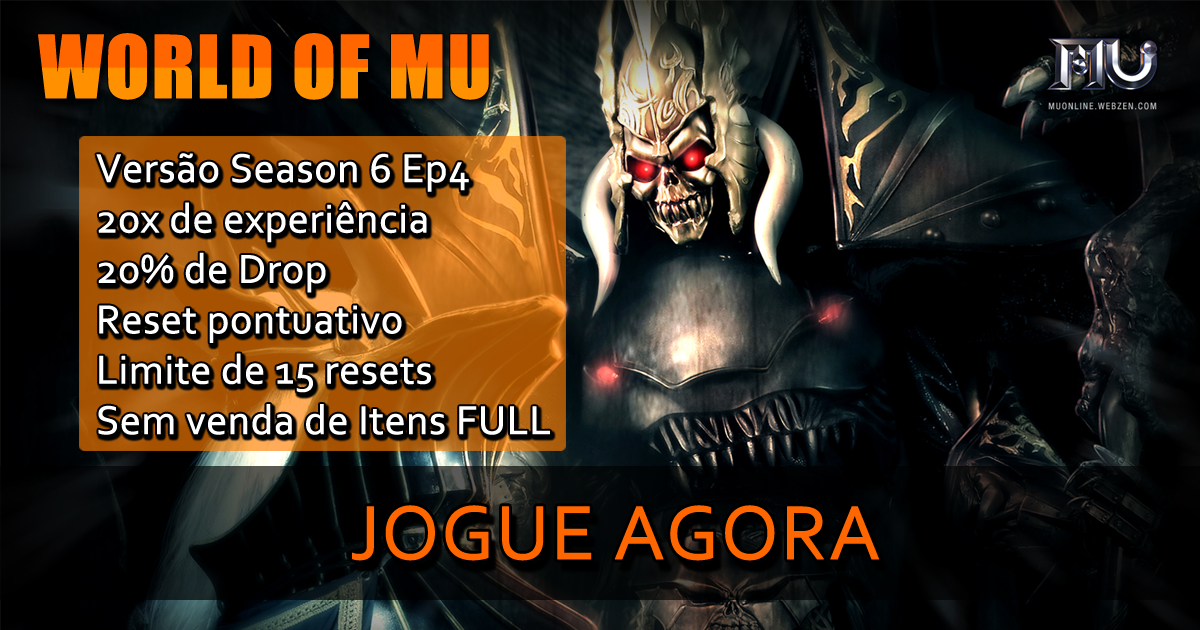
<style>
.page{position:relative;width:1200px;height:630px}
.page>*{position:absolute;margin:0}
.t1{font:80px "Impact";font-weight:bold}
.t2{font:42px "Corbel";letter-spacing:-0.01em;color:#ffffff;font-weight:bold}
.t3{font:80px "Corbel";letter-spacing:-0.01em;color:#ff6600;font-weight:bold}
</style>
<div class="page">
<p class="t1" style="left:38px;top:33px;width:451px;height:67px">WORLD OF MU</p>
<p class="t2" style="left:96px;top:153px;width:454px;height:282px">Versão Season 6 Ep4<br>20x de experiência<br>20% de Drop<br>Reset pontuativo <br>Limite de 15 resets<br>Sem venda de Itens FULL</p>
<p class="t3" style="left:352px;top:505px;width:527px;height:56px">JOGUE AGORA</p>
</div>
